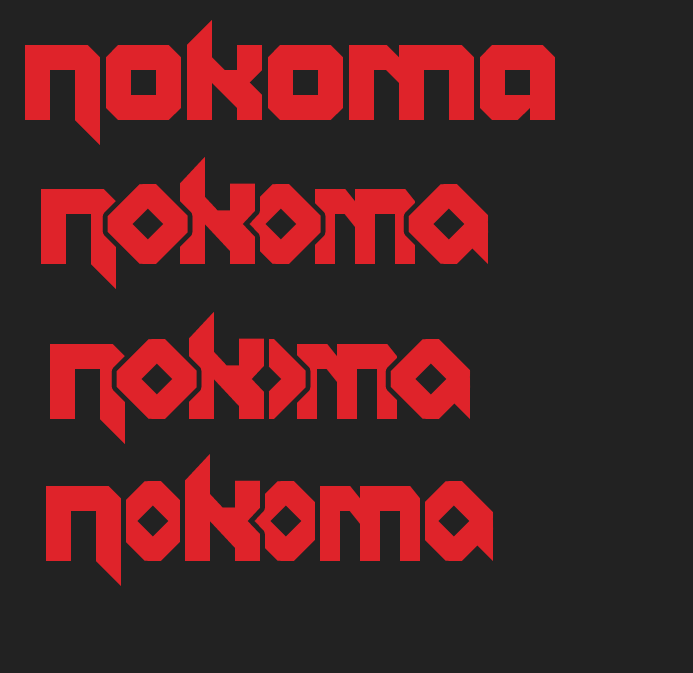
<style>
.page{position:relative;width:693px;height:673px;background:#222222}
.page>*{position:absolute;margin:0}
.t1{font:200px "Vannoidyk";letter-spacing:-0.02em;color:#df232a}
.t2{font:214px "Vannoidyk";letter-spacing:-0.02em;color:#df232a;scale:0.93 1}
.t3{font:180px "Vannoidyk";letter-spacing:-0.02em;color:#df232a}
.t4{font:200px "Vannoidyk";letter-spacing:-0.02em;color:#df232a;scale:0.8 1}
</style>
<div class="page">
<p class="t1" style="left:25px;top:20px;width:530px;height:125px">nokoma</p>
<p class="t2" style="left:180px;top:157px;width:75px;height:107px">k</p>
<p class="t3" style="left:107px;top:184px;width:81px;height:80px;rotate:45deg">o</p>
<p class="t3" style="left:240px;top:184px;width:81px;height:80px;rotate:45deg">o</p>
<p class="t1" style="left:41px;top:189px;width:75px;height:100px">n</p>
<p class="t4" style="left:315px;top:189px;width:100px;height:75px">m</p>
</div>
